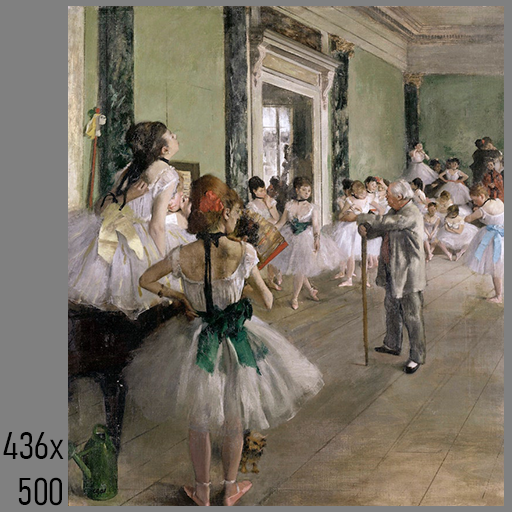
<style>
.page{position:relative;width:512px;height:512px}
.page>*{position:absolute;margin:0}
.t1{font:38px "Bahnschrift-LightCondensed";color:#000000}
</style>
<div class="page">
<p class="t1" style="left:3px;top:432px;width:61px;height:74px;text-align:right">436x<br>500</p>
</div>
